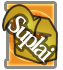
<style>
.page{position:relative;width:63px;height:70px}
.page>*{position:absolute;margin:0}
.t1{font:25px "HeiseiMinStd-W7";letter-spacing:-0.08em;color:#fffef9;scale:0.9 1}
</style>
<div class="page">
<p class="t1" style="left:8px;top:16px;width:47px;height:47px;rotate:44deg">Suplai</p>
</div>
